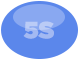
<style>
.page{position:relative;width:80px;height:60px;background:#5b87eb}
.page>*{position:absolute;margin:0}
.t1{font:24px "GothamUltra"}
</style>
<div class="page">
<p class="t1" style="left:23px;top:21px;width:31px;height:18px">5S</p>
</div>
